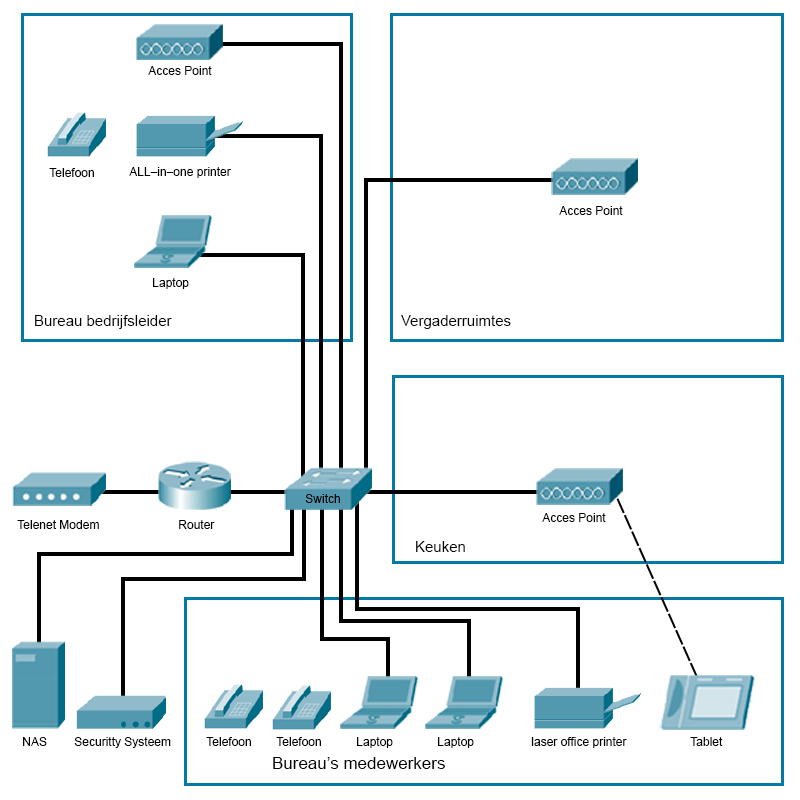
<style>
.page{position:relative;width:800px;height:800px;background:#ffffff}
.page>*{position:absolute;margin:0}
.t1{font:12px "ArialMT";color:#000000}
.t2{font:15px "ArialMT";color:#000000}
.t3{font:17px "ArialMT";color:#000000}
</style>
<div class="page">
<p class="t1" style="left:148px;top:66px;width:64px;height:9px">Acces Point</p>
<p class="t1" style="left:49px;top:168px;width:45px;height:9px">Telefoon</p>
<p class="t1" style="left:129px;top:167px;width:102px;height:11px">ALL–in–one printer</p>
<p class="t1" style="left:559px;top:206px;width:64px;height:9px">Acces Point</p>
<p class="t1" style="left:153px;top:278px;width:36px;height:11px">Laptop</p>
<p class="t2" style="left:35px;top:315px;width:137px;height:14px">Bureau bedrijfsleider</p>
<p class="t2" style="left:401px;top:315px;width:110px;height:14px">Vergaderruimtes</p>
<p class="t1" style="left:305px;top:494px;width:35px;height:9px">Switch</p>
<p class="t1" style="left:17px;top:520px;width:82px;height:9px">Telenet Modem</p>
<p class="t1" style="left:179px;top:520px;width:36px;height:9px">Router</p>
<p class="t1" style="left:542px;top:513px;width:64px;height:9px">Acces Point</p>
<p class="t2" style="left:416px;top:541px;width:49px;height:11px">Keuken</p>
<p class="t1" style="left:23px;top:737px;width:24px;height:9px">NAS</p>
<p class="t1" style="left:74px;top:737px;width:97px;height:11px">Securitty Systeem</p>
<p class="t1" style="left:206px;top:737px;width:45px;height:9px">Telefoon</p>
<p class="t1" style="left:276px;top:737px;width:45px;height:9px">Telefoon</p>
<p class="t1" style="left:357px;top:737px;width:36px;height:11px">Laptop</p>
<p class="t1" style="left:438px;top:737px;width:36px;height:11px">Laptop</p>
<p class="t1" style="left:531px;top:737px;width:96px;height:11px">laser office printer</p>
<p class="t1" style="left:690px;top:737px;width:33px;height:9px">Tablet</p>
<p class="t3" style="left:273px;top:757px;width:172px;height:12px">Bureau’s medewerkers</p>
</div>
